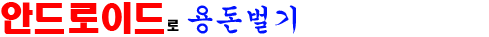
<style>
.page{position:relative;width:489px;height:37px;background:#ffffff}
.page>*{position:absolute;margin:0}
.t1{font:33.3px "HeadlineR-HM";color:#ff0000}
.t2{font:12.5px "HeadlineR-HM";color:#000000}
.t3{font:29.2px "Gungsuh";color:#0012ff}
</style>
<div class="page">
<p class="t1" style="left:1px;top:2px;width:295px;height:32px">안드로이드<span class="t2">로 </span><span class="t3">용돈벌기</span></p>
</div>
